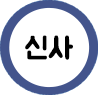
<style>
.page{position:relative;width:98px;height:95px;background:#ffffff}
.page>*{position:absolute;margin:0}
.t1{font:30px "BMJUA";color:#000000}
</style>
<div class="page">
<p class="t1" style="left:25px;top:35px;width:48px;height:25px">신사</p>
</div>
